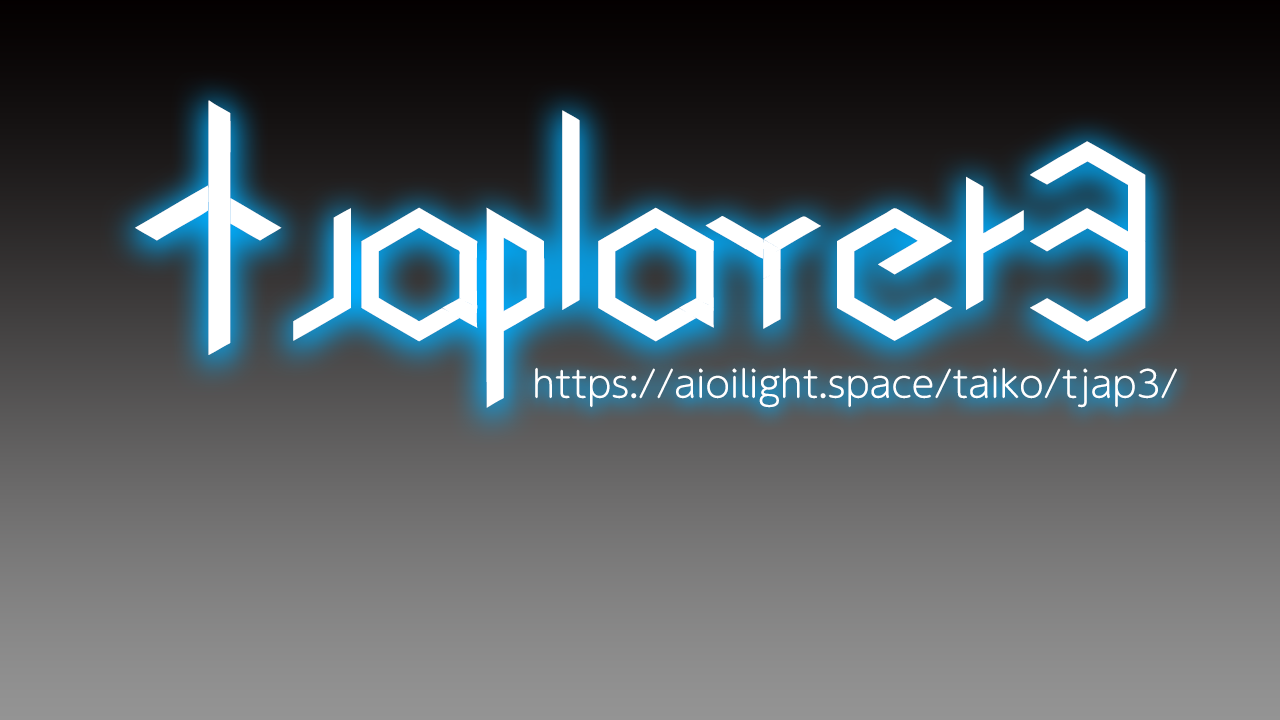
<style>
.page{position:relative;width:1280px;height:720px}
.page>*{position:absolute;margin:0}
.t1{font:157px "Cubic";color:#ffffff}
.t2{font:200px "Cubic";color:#ffffff}
.t3{font:36px "UDShinMGoPr6N-Light";color:#ffffff}
</style>
<div class="page">
<p class="t1" style="left:135px;top:100px;width:1011px;height:308px"><span class="t2">T</span>JAPLayer3</p>
<p class="t3" style="left:535px;top:367px;width:642px;height:41px">https://aioilight.space/taiko/tjap3/</p>
</div>
